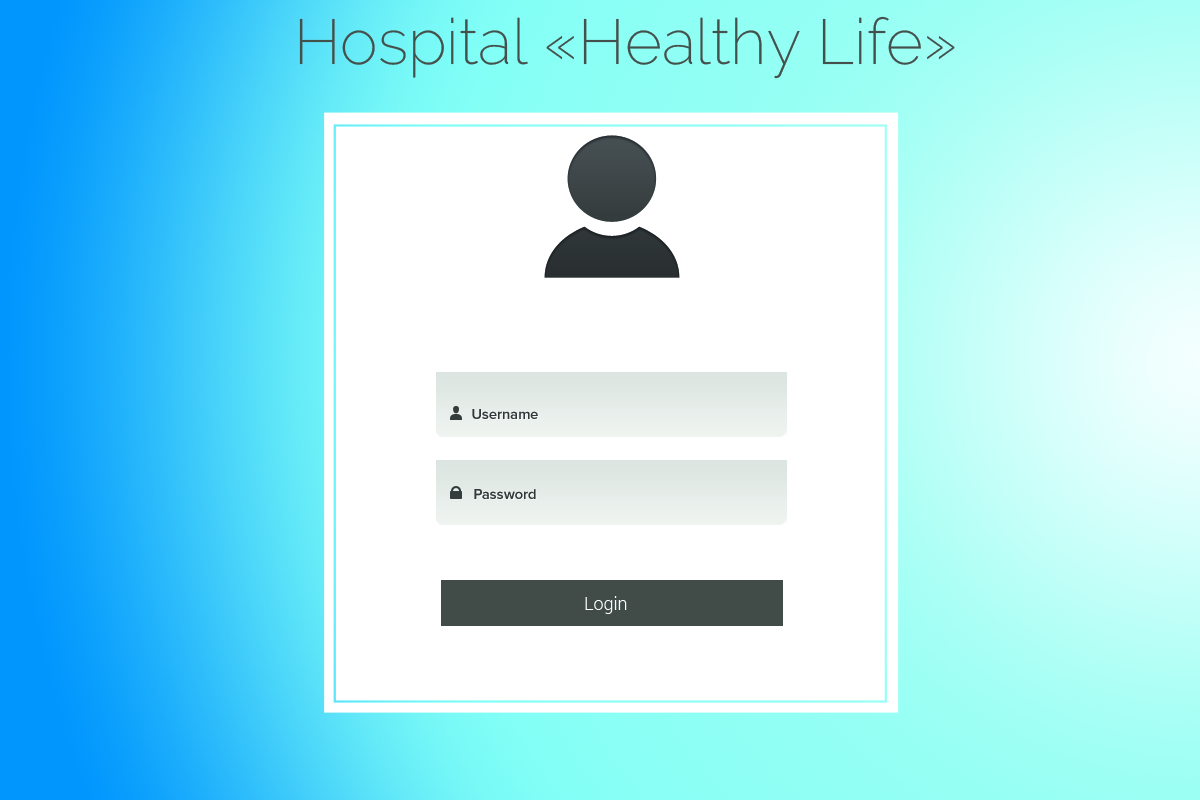
<style>
.page{position:relative;width:1200px;height:800px;background:#ffffff}
.page>*{position:absolute;margin:0}
.t1{font:63.5px "Raleway-ExtraLight";color:#44504c}
.t2{font:14.6px "ProximaNova-Semibold";color:#363636}
.t3{font:18px "Roboto-Light";color:#ffffff}
</style>
<div class="page">
<p class="t1" style="left:299px;top:16px;width:656px;height:63px">Hospital «Healthy Life»</p>
<p class="t2" style="left:472px;top:409px;width:66px;height:10px">Username</p>
<p class="t2" style="left:474px;top:489px;width:62px;height:10px">Password</p>
<p class="t3" style="left:585px;top:596px;width:42px;height:18px">Login</p>
</div>
